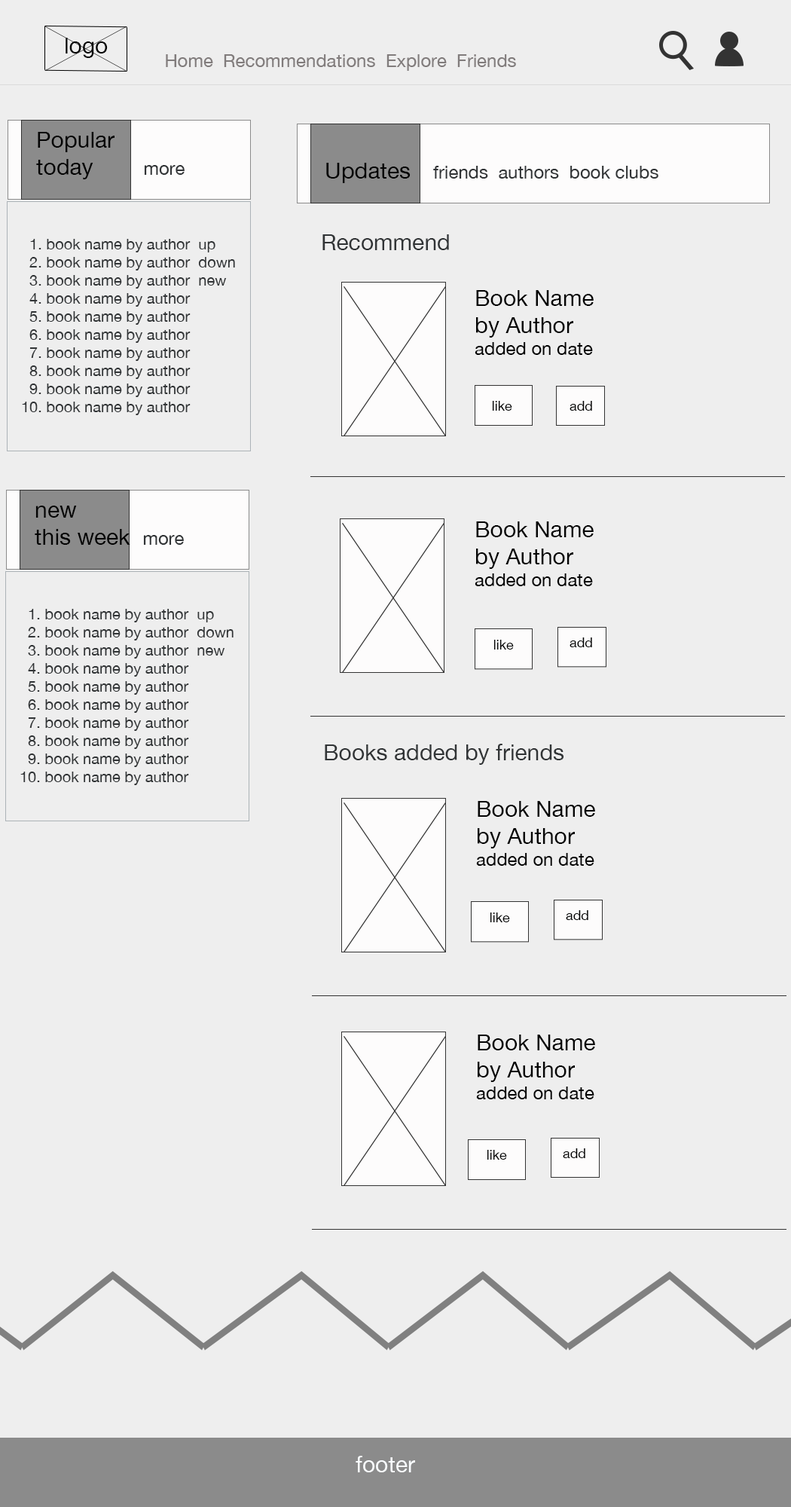
<style>
.page{position:relative;width:791px;height:1507px;background:#eeeeee}
.page>*{position:absolute;margin:0}
.t1{font:22.6px "HelveticaNeue";color:#050505}
.t2{font:18.1px "HelveticaNeue";color:#817c7c}
.t3{font:22.6px "HelveticaNeue";color:#030303}
.t4{font:18.1px "HelveticaNeue";color:#313436}
.t5{font:15.1px "HelveticaNeue";color:#313436}
.t6{font:22.6px "HelveticaNeue";color:#313436}
.t7{font:18.1px "HelveticaNeue";color:#030303}
.t8{font:13.6px "HelveticaNeue";color:#030303}
.t9{font:22.6px "HelveticaNeue";color:#f9fcfe}
</style>
<div class="page">
<p class="t1" style="left:66px;top:38px;width:42px;height:20px">logo</p>
<p class="t2" style="left:166px;top:54px;width:350px;height:17px">Home  Recommendations  Explore  Friends</p>
<p class="t3" style="left:36px;top:132px;width:149px;height:47px">Popular<br>today        <span class="t4">more</span></p>
<p class="t4" style="left:326px;top:163px;width:333px;height:20px"><span class="t3">Updates    </span>friends  authors  book clubs</p>
<p class="t5" style="left:22px;top:239px;width:213px;height:176px">1. book name by author  up <br>  2. book name by author  down<br>  3. book name by author  new<br>  4. book name by author<br>  5. book name by author<br>  6. book name by author     <br>  7. book name by author<br>  8. book name by author<br>  9. book name by author<br>10. book name by author</p>
<p class="t6" style="left:323px;top:234px;width:126px;height:16px">Recommend</p>
<p class="t3" style="left:475px;top:290px;width:119px;height:65px">Book Name<br>by Author<br><span class="t7">added on date</span></p>
<p class="t8" style="left:492px;top:401px;width:20px;height:10px">like</p>
<p class="t8" style="left:570px;top:401px;width:22px;height:10px">add</p>
<p class="t3" style="left:35px;top:506px;width:149px;height:39px">new <br>this week  <span class="t4">more</span></p>
<p class="t3" style="left:475px;top:521px;width:119px;height:65px">Book Name<br>by Author<br><span class="t7">added on date</span></p>
<p class="t5" style="left:20px;top:609px;width:214px;height:176px">1. book name by author  up <br>  2. book name by author  down<br>  3. book name by author  new<br>  4. book name by author<br>  5. book name by author<br>  6. book name by author     <br>  7. book name by author<br>  8. book name by author<br>  9. book name by author<br>10. book name by author</p>
<p class="t8" style="left:494px;top:640px;width:20px;height:10px">like</p>
<p class="t8" style="left:570px;top:637px;width:22px;height:10px">add</p>
<p class="t6" style="left:325px;top:744px;width:239px;height:21px">Books added by friends</p>
<p class="t3" style="left:476px;top:801px;width:119px;height:65px">Book Name<br>by Author<br><span class="t7">added on date</span></p>
<p class="t8" style="left:490px;top:913px;width:20px;height:9px">like</p>
<p class="t8" style="left:566px;top:910px;width:23px;height:10px">add</p>
<p class="t3" style="left:476px;top:1035px;width:119px;height:64px">Book Name<br>by Author<br><span class="t7">added on date</span></p>
<p class="t8" style="left:487px;top:1150px;width:20px;height:10px">like</p>
<p class="t8" style="left:563px;top:1148px;width:23px;height:10px">add</p>
<p class="t9" style="left:356px;top:1456px;width:59px;height:16px">footer</p>
</div>
